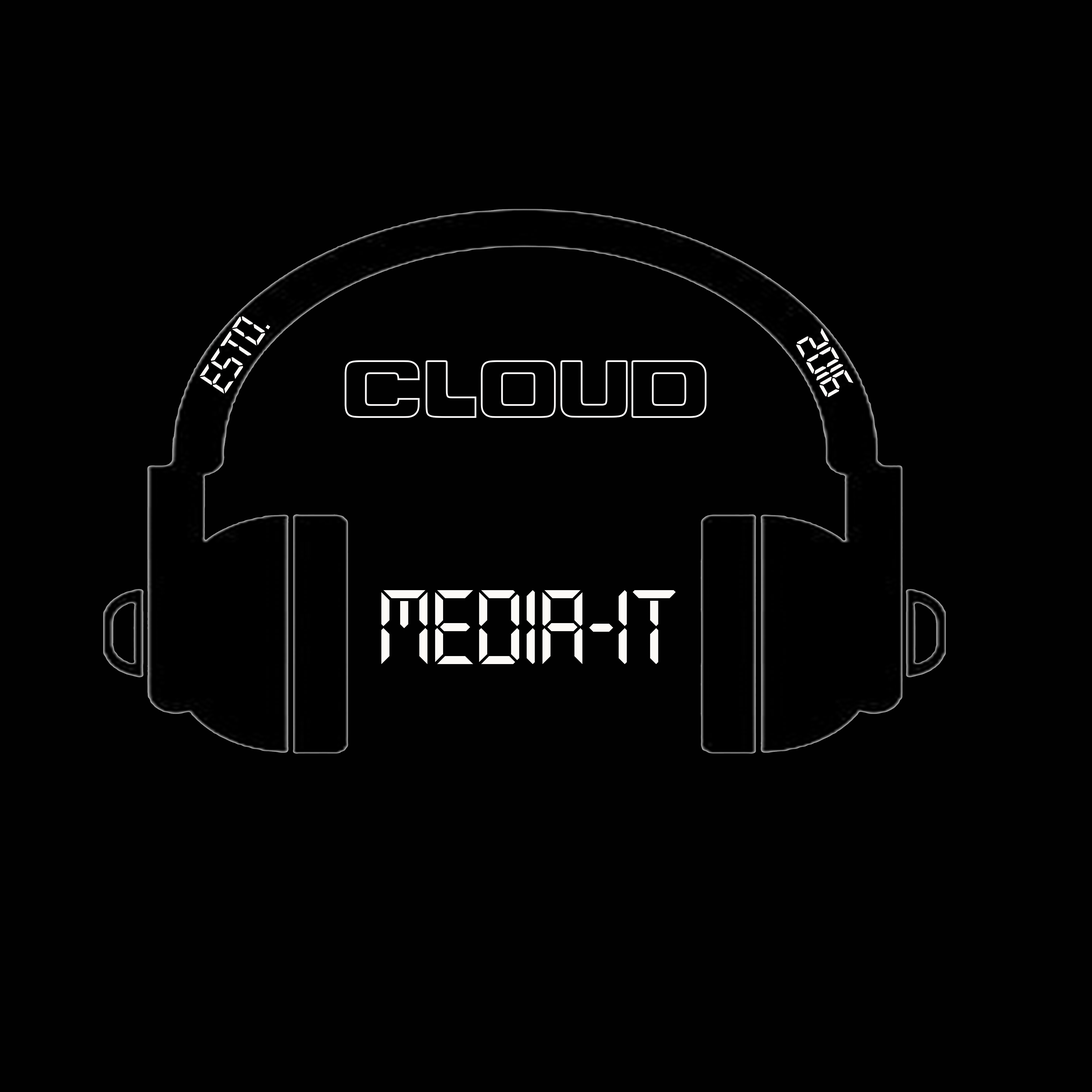
<style>
.page{position:relative;width:1092px;height:1092px;background:#010101}
.page>*{position:absolute;margin:0}
.t1{font:44.8px "Technology-Regular";color:#fcfaf7}
.t2{font:107.2px "Technology-Regular";color:#fcfaf7}
</style>
<div class="page">
<p class="t1" style="left:199px;top:316px;width:71px;height:78px;rotate:-56deg">ESTD.</p>
<p class="t1" style="left:796px;top:328px;width:58px;height:69px;rotate:60deg">2016</p>
<p class="t2" style="left:381px;top:590px;width:295px;height:74px">mEDIA-IT</p>
</div>
